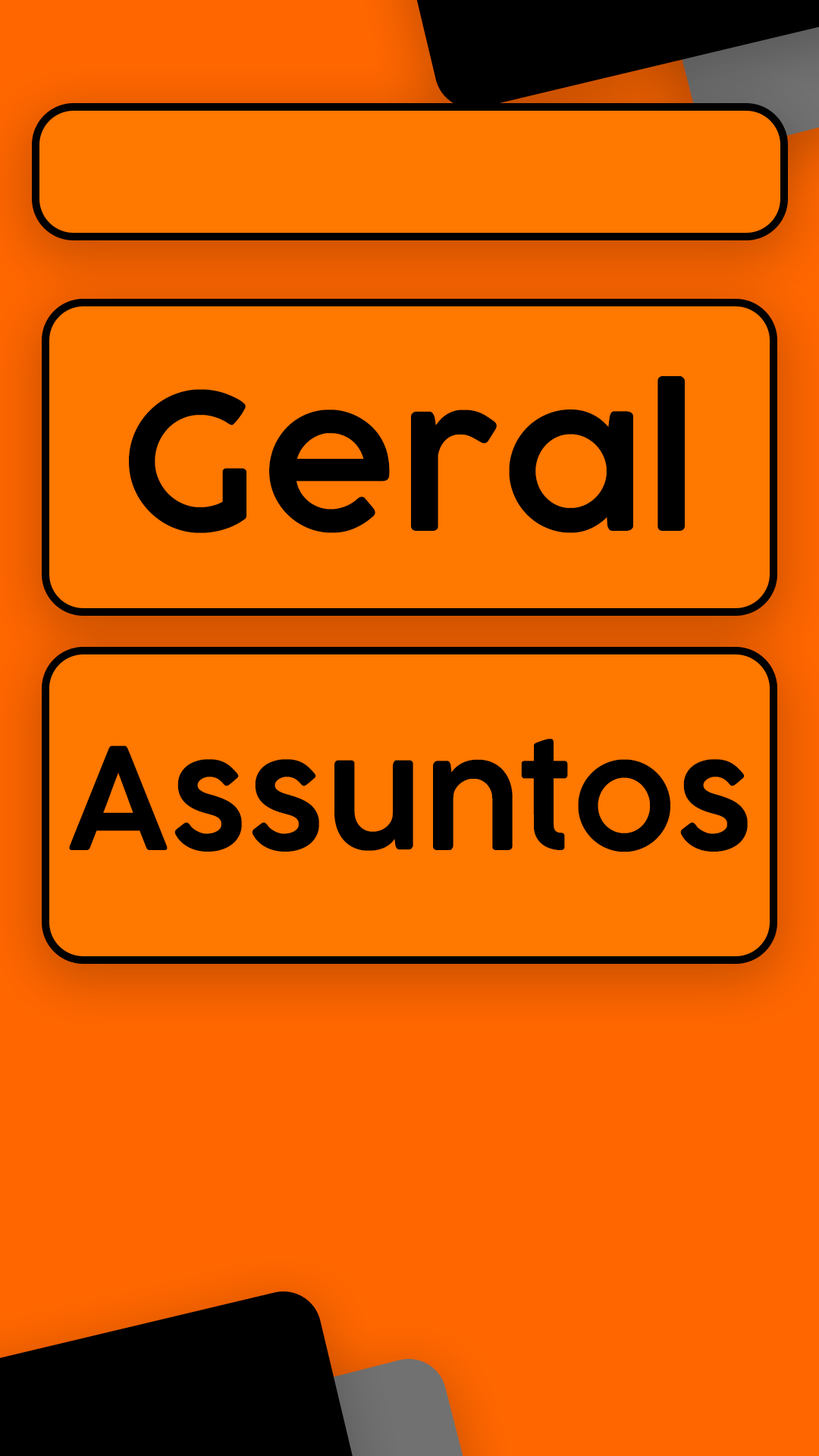
<style>
.page{position:relative;width:819px;height:1456px;background:#ff7800}
.page>*{position:absolute;margin:0}
.t1{font:187.8px "COCOGOOSE-DemiBold";color:#000000}
.t2{font:140.4px "COCOGOOSE-DemiBold";color:#000000}
</style>
<div class="page">
<p class="t1" style="left:129px;top:376px;width:556px;height:157px">Geral</p>
<p class="t2" style="left:69px;top:739px;width:679px;height:113px">Assuntos</p>
</div>
